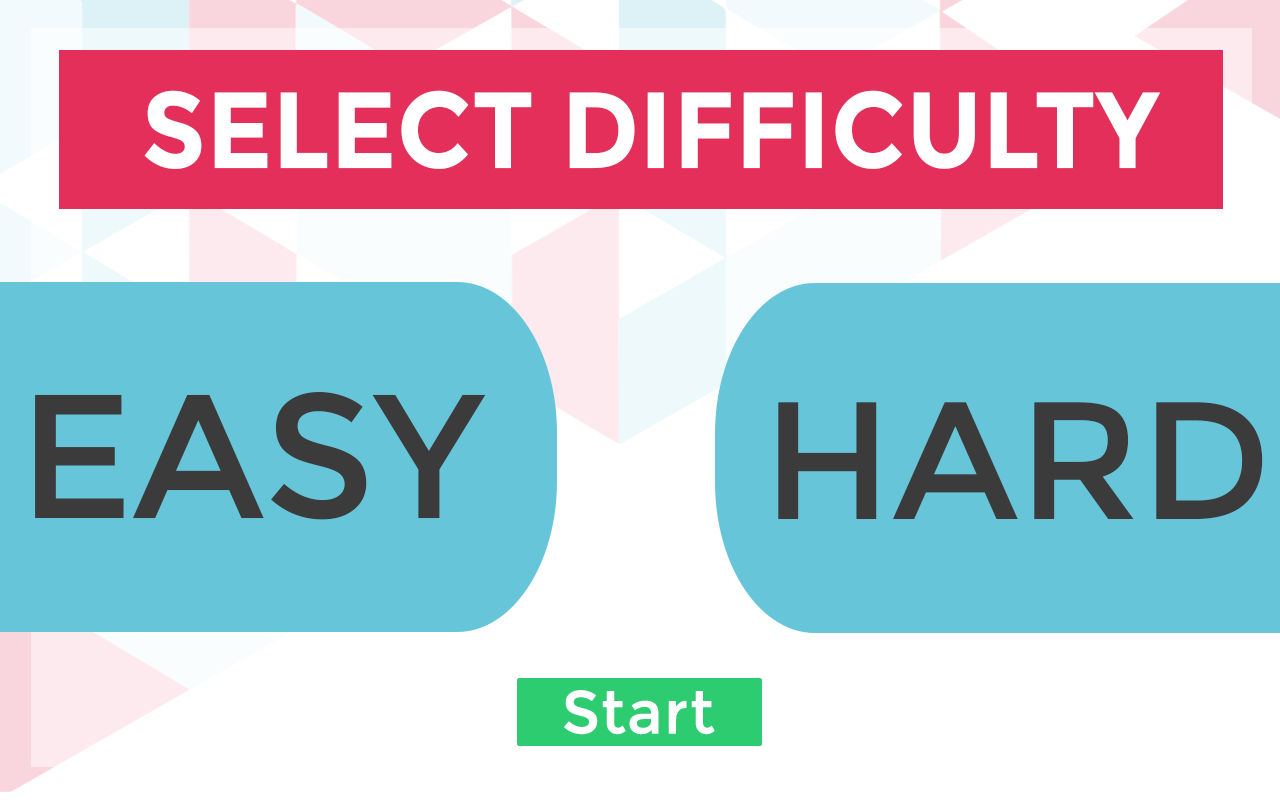
<style>
.page{position:relative;width:1280px;height:800px;background:#67c5da}
.page>*{position:absolute;margin:0}
.t1{font:108px "Montserrat-Bold";color:#ffffff;scale:0.94 1}
.t2{font:176.4px "Montserrat-Regular";color:#3b3b3b}
.t3{font:167.3px "Montserrat-Regular";color:#3b3b3b}
</style>
<div class="page">
<p class="t1" style="left:144px;top:90px;width:1017px;height:79px">SELECT DIFFICULTY</p>
<p class="t2" style="left:35px;top:391px;width:451px;height:129px">EASY</p>
<p class="t3" style="left:778px;top:402px;width:485px;height:117px">HARD</p>
</div>
